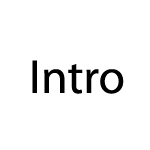
<style>
.page{position:relative;width:150px;height:150px;background:#ffffff}
.page>*{position:absolute;margin:0}
.t1{font:48px "MyriadPro-Regular";color:#000000}
</style>
<div class="page">
<p class="t1" style="left:32px;top:60px;width:92px;height:34px">Intro</p>
</div>
